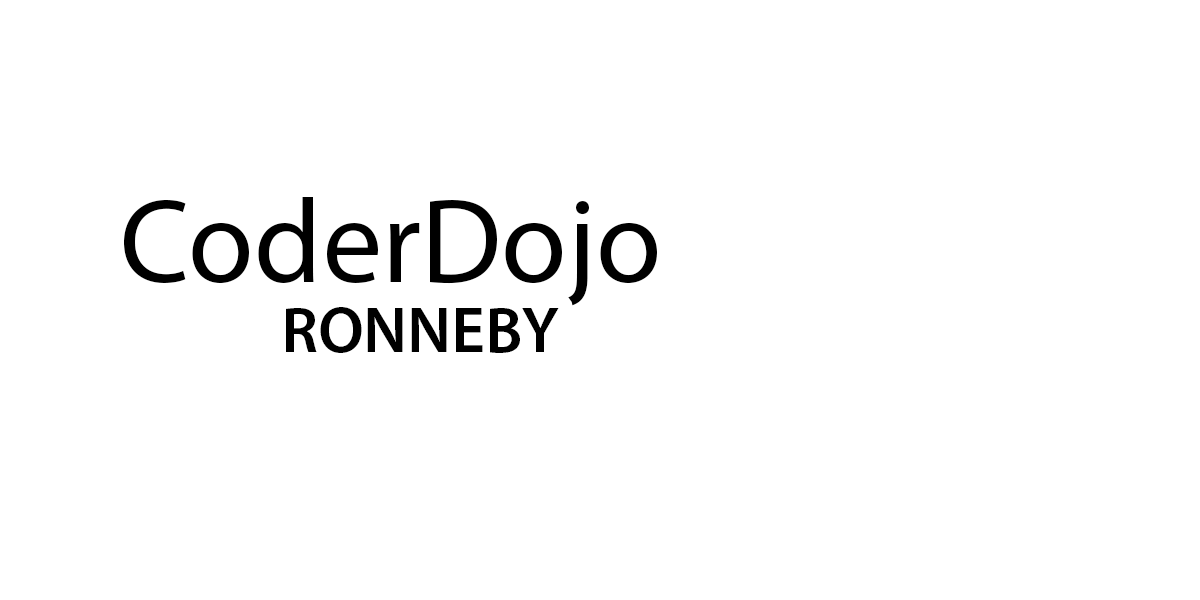
<style>
.page{position:relative;width:1200px;height:600px;background:#ffffff}
.page>*{position:absolute;margin:0}
.t1{font:120px "MyriadPro-Regular";color:#000000}
.t2{font:65px "MyriadPro-Semibold";color:#000000}
</style>
<div class="page">
<p class="t1" style="left:124px;top:197px;width:533px;height:110px">CoderDojo</p>
<p class="t2" style="left:286px;top:307px;width:273px;height:46px">RONNEBY</p>
</div>
